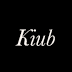
<style>
.page{position:relative;width:72px;height:72px;background:#000000}
.page>*{position:absolute;margin:0}
.t1{font:24px "Baskerville-Italic";color:#fffaf5}
</style>
<div class="page">
<p class="t1" style="left:15px;top:29px;width:40px;height:17px">Kiub</p>
</div>
